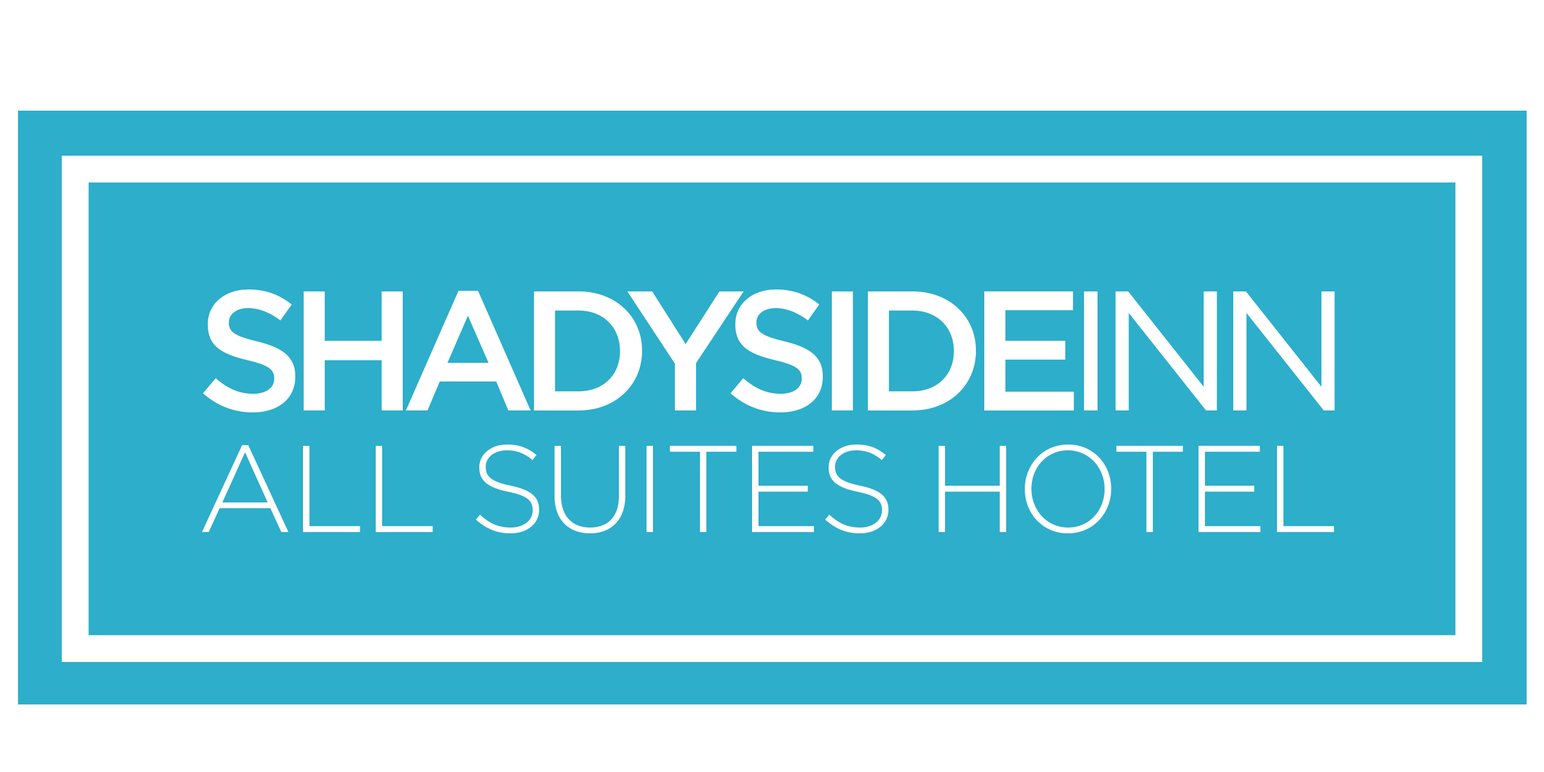
<style>
.page{position:relative;width:1544px;height:772px;background:#2daeca}
.page>*{position:absolute;margin:0}
.t1{font:170.5px "Gotham-Medium";letter-spacing:-0.1em;color:#ffffff}
.t2{font:170.5px "Gotham-Book";letter-spacing:-0.1em;color:#ffffff}
.t3{font:122.8px "Gotham-Light";letter-spacing:-0.03em;color:#ffffff}
</style>
<div class="page">
<p class="t1" style="left:203px;top:289px;width:1132px;height:124px">SHADYSIDE<span class="t2">INN</span></p>
<p class="t3" style="left:202px;top:445px;width:1133px;height:88px">ALL SUITES HOTEL</p>
</div>
